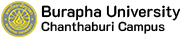
<style>
.page{position:relative;width:180px;height:38px;background:#ffffff}
.page>*{position:absolute;margin:0}
.t1{font:16px/16px "K2D-SemiBold";color:#000000}
.t2{font:13px/14px "K2D-SemiBold";color:#000000}
</style>
<div class="page">
<p class="t1" style="left:41px;top:5px;width:140px;height:29px">Burapha University <br><span class="t2">Chanthaburi Campus</span></p>
</div>
